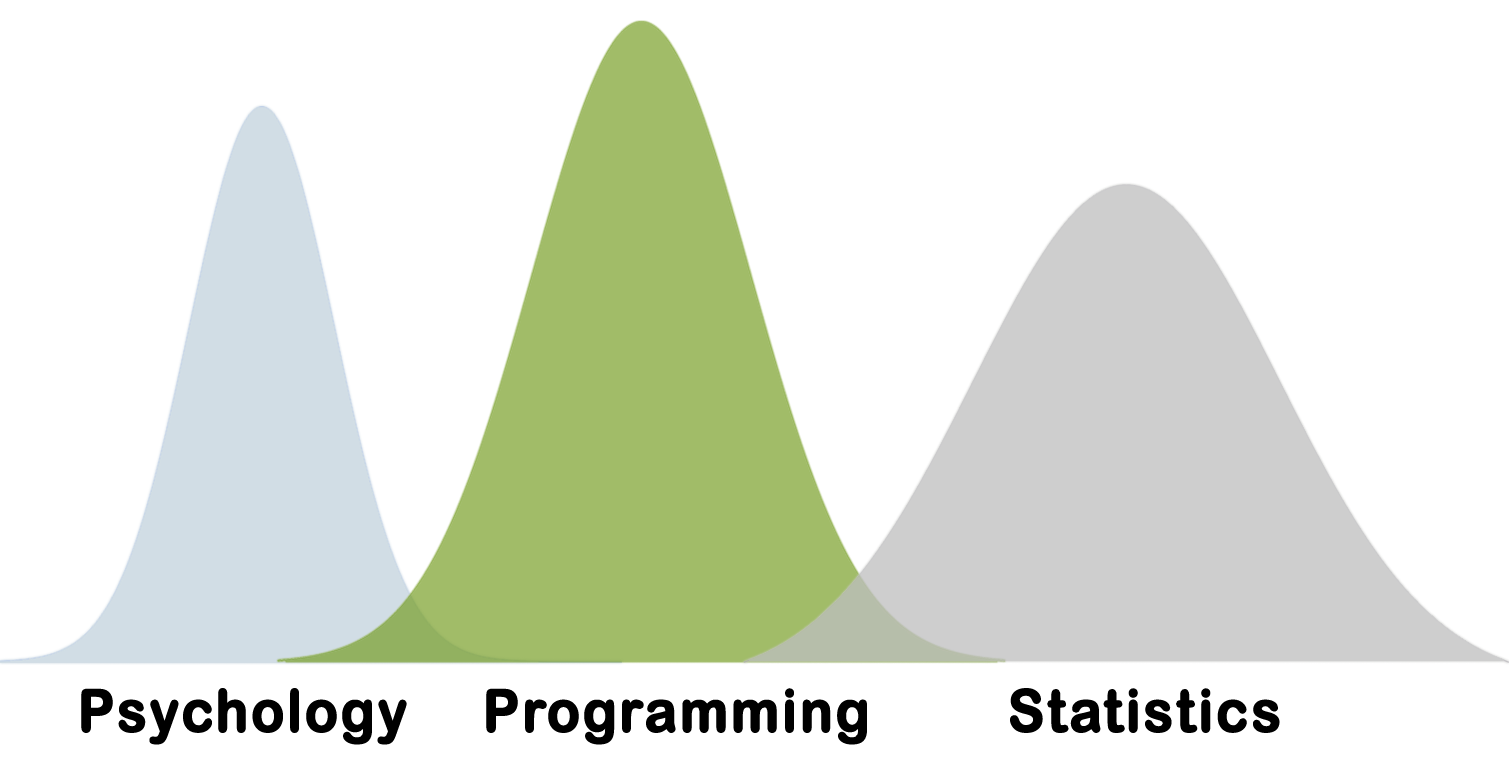
<style>
.page{position:relative;width:1509px;height:764px;background:#ffffff}
.page>*{position:absolute;margin:0}
.t1{font:58.3px "ArialRoundedMTBold";letter-spacing:0.03em;color:#000000;font-weight:bold;scale:0.93 1}
</style>
<div class="page">
<p class="t1" style="left:81px;top:688px;width:326px;height:57px">Psychology</p>
<p class="t1" style="left:486px;top:688px;width:381px;height:57px">Programming</p>
<p class="t1" style="left:1010px;top:688px;width:270px;height:45px">Statistics</p>
</div>
